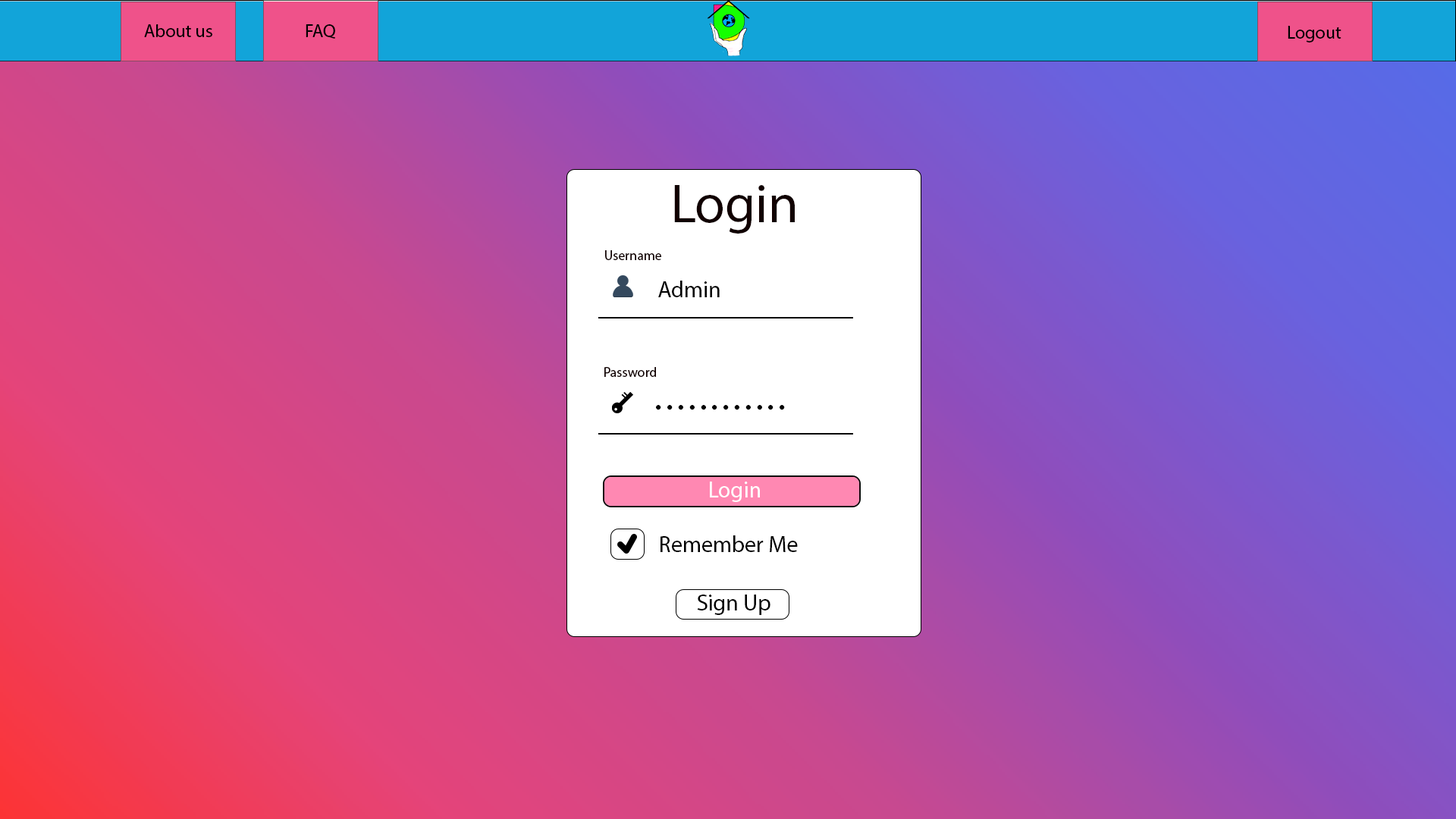
<style>
.page{position:relative;width:1456px;height:819px}
.page>*{position:absolute;margin:0}
.t1{font:18.2px "MyriadPro-Regular";color:#000000}
.t2{font:54.6px "MyriadPro-Regular";color:#110000}
.t3{font:13.6px "MyriadPro-Regular";color:#110000}
.t4{font:22.7px "MyriadPro-Regular";color:#000000}
.t5{font:22.7px "MyriadPro-Regular";color:#ffffff}
</style>
<div class="page">
<p class="t1" style="left:144px;top:24px;width:68px;height:13px">About us</p>
<p class="t1" style="left:306px;top:24px;width:29px;height:15px">FAQ</p>
<p class="t1" style="left:1288px;top:26px;width:53px;height:16px">Logout</p>
<p class="t2" style="left:674px;top:185px;width:121px;height:49px">Login</p>
<p class="t3" style="left:605px;top:250px;width:56px;height:10px">Username</p>
<p class="t4" style="left:658px;top:281px;width:62px;height:16px">Admin</p>
<p class="t3" style="left:604px;top:367px;width:52px;height:10px">Password</p>
<p class="t4" style="left:656px;top:405px;width:129px;height:5px">• • • • • • • • • • • •</p>
<p class="t5" style="left:710px;top:482px;width:50px;height:20px">Login</p>
<p class="t4" style="left:660px;top:535px;width:138px;height:17px">Remember Me</p>
<p class="t4" style="left:697px;top:595px;width:73px;height:20px">Sign Up</p>
</div>
